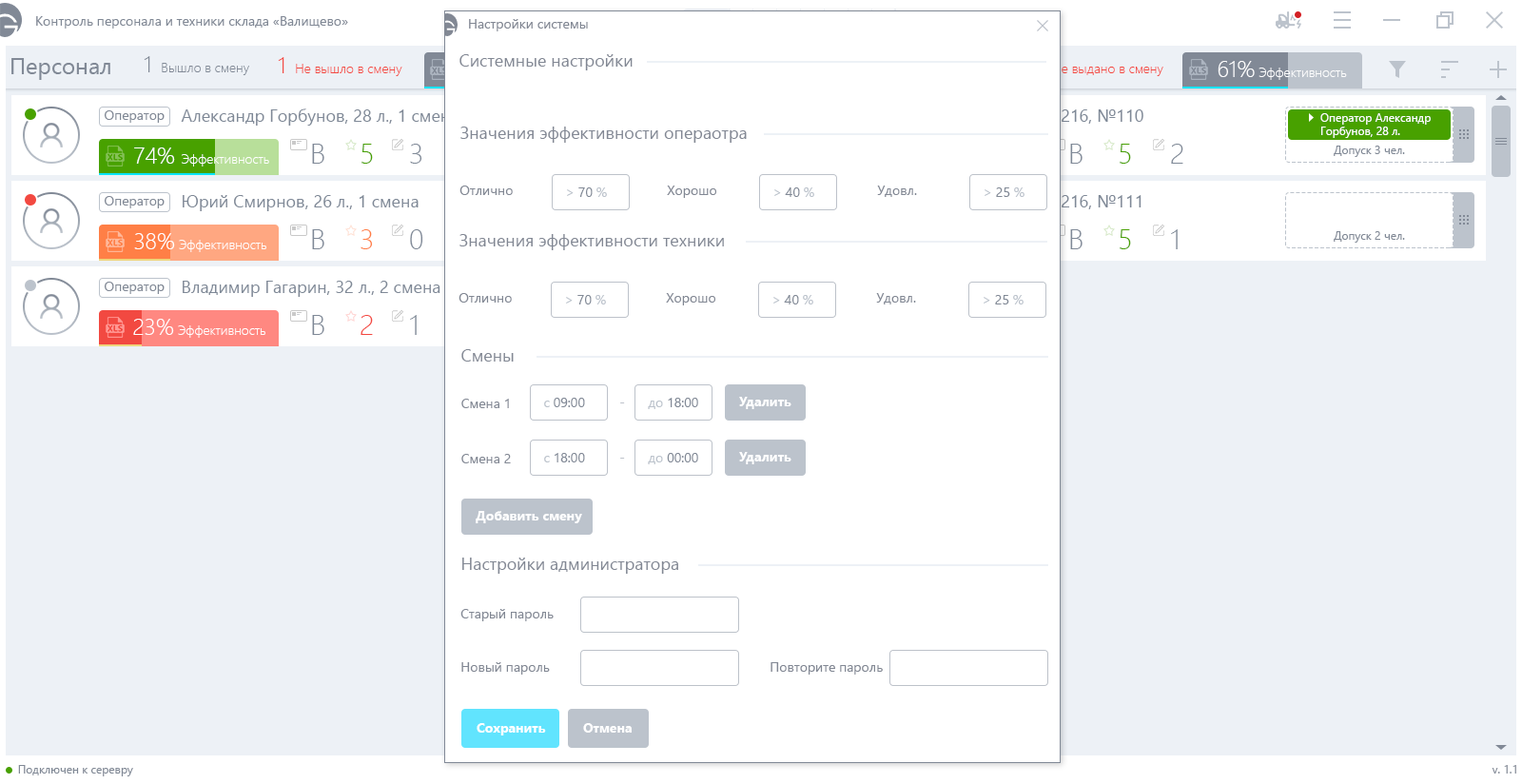
<style>
.page{position:relative;width:1522px;height:784px;background:#ffffff}
.page>*{position:absolute;margin:0}
.t1{font:13.3px "SegoeUI";color:#828894}
.t2{font:17.1px "SegoeUI";color:#828894}
.t3{font:13.3px "SegoeUI";color:#818996}
.t4{font:13.3px "SegoeUI";color:#bcc3cc}
.t5{font:13.3px "SegoeUI-Bold";color:#ffffff}
.t6{font:13.3px "SegoeUI";color:#bdc2ca}
</style>
<div class="page">
<p class="t1" style="left:469px;top:19px;width:119px;height:12px">Настройки системы</p>
<p class="t2" style="left:459px;top:54px;width:173px;height:16px">Системные настройки</p>
<p class="t2" style="left:460px;top:126px;width:287px;height:17px">Значения эффективности операотра</p>
<p class="t1" style="left:459px;top:185px;width:54px;height:10px">Отлично</p>
<p class="t1" style="left:667px;top:185px;width:49px;height:13px">Хорошо</p>
<p class="t1" style="left:877px;top:185px;width:40px;height:12px">Удовл.</p>
<p class="t3" style="left:567px;top:187px;width:40px;height:10px"><span class="t4">&gt; </span>70<span class="t4"> %</span></p>
<p class="t3" style="left:774px;top:187px;width:40px;height:10px"><span class="t4">&gt; </span>40<span class="t4"> %</span></p>
<p class="t3" style="left:984px;top:187px;width:40px;height:10px"><span class="t4">&gt; </span>25<span class="t4"> %</span></p>
<p class="t2" style="left:459px;top:234px;width:265px;height:16px">Значения эффективности техники</p>
<p class="t1" style="left:458px;top:293px;width:54px;height:9px">Отлично</p>
<p class="t1" style="left:666px;top:293px;width:49px;height:12px">Хорошо</p>
<p class="t1" style="left:876px;top:293px;width:40px;height:11px">Удовл.</p>
<p class="t3" style="left:566px;top:295px;width:40px;height:9px"><span class="t4">&gt; </span>70<span class="t4"> %</span></p>
<p class="t3" style="left:773px;top:295px;width:40px;height:9px"><span class="t4">&gt; </span>40<span class="t4"> %</span></p>
<p class="t3" style="left:983px;top:295px;width:40px;height:9px"><span class="t4">&gt; </span>25<span class="t4"> %</span></p>
<p class="t2" style="left:461px;top:349px;width:53px;height:12px">Смены</p>
<p class="t1" style="left:461px;top:398px;width:48px;height:10px">Смена 1</p>
<p class="t3" style="left:544px;top:398px;width:41px;height:9px"><span class="t4">с </span>09:00</p>
<p class="t3" style="left:648px;top:398px;width:50px;height:11px"><span class="t4">до </span>18:00</p>
<p class="t5" style="left:739px;top:397px;width:52px;height:12px">Удалить</p>
<p class="t6" style="left:620px;top:402px;width:5px;height:1px">-</p>
<p class="t1" style="left:461px;top:454px;width:50px;height:9px">Смена 2</p>
<p class="t3" style="left:544px;top:453px;width:41px;height:9px"><span class="t4">с </span>18:00</p>
<p class="t6" style="left:620px;top:457px;width:5px;height:1px">-</p>
<p class="t3" style="left:648px;top:453px;width:50px;height:11px"><span class="t4">до </span>00:00</p>
<p class="t5" style="left:739px;top:452px;width:52px;height:12px">Удалить</p>
<p class="t5" style="left:476px;top:511px;width:106px;height:12px">Добавить смену</p>
<p class="t2" style="left:462px;top:557px;width:216px;height:16px">Настройки администратора</p>
<p class="t1" style="left:460px;top:609px;width:93px;height:12px">Старый пароль</p>
<p class="t1" style="left:461px;top:662px;width:89px;height:12px">Новый пароль</p>
<p class="t1" style="left:770px;top:662px;width:113px;height:12px">Повторите пароль</p>
<p class="t5" style="left:476px;top:723px;width:70px;height:12px">Сохранить</p>
<p class="t5" style="left:583px;top:723px;width:48px;height:9px">Отмена</p>
</div>
